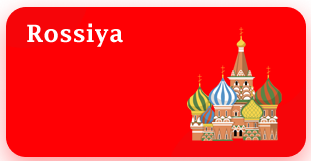
<style>
.page{position:relative;width:311px;height:161px;background:#ff0004}
.page>*{position:absolute;margin:0}
.t1{font:24px "LucidaFax-Demi";color:#ffffff}
</style>
<div class="page">
<p class="t1" style="left:27px;top:23px;width:96px;height:24px">Rossiya</p>
</div>
